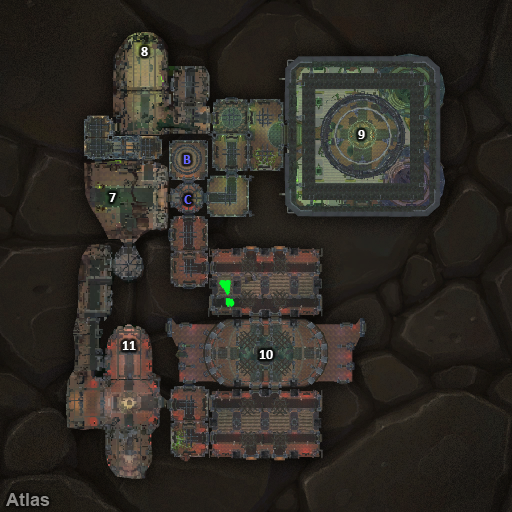
<style>
.page{position:relative;width:512px;height:512px}
.page>*{position:absolute;margin:0}
.t1{font:14px "Calibri-Bold";color:#ffffff}
.t2{font:14px "Calibri-Bold";color:#6666ff}
</style>
<div class="page">
<p class="t1" style="left:141px;top:47px;width:7px;height:9px">8</p>
<p class="t1" style="left:358px;top:130px;width:7px;height:9px">9</p>
<p class="t2" style="left:183px;top:155px;width:8px;height:9px">B</p>
<p class="t1" style="left:109px;top:193px;width:7px;height:9px">7</p>
<p class="t2" style="left:184px;top:195px;width:8px;height:9px">C</p>
<p class="t1" style="left:122px;top:341px;width:14px;height:9px">11</p>
<p class="t1" style="left:259px;top:350px;width:14px;height:9px">10</p>
</div>
